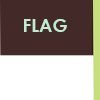
<style>
.page{position:relative;width:100px;height:100px;background:#442929}
.page>*{position:absolute;margin:0}
.t1{font:18px "CenturyGothic-Bold";color:#bfedd1}
</style>
<div class="page">
<p class="t1" style="left:24px;top:19px;width:43px;height:13px">FLAG</p>
</div>
